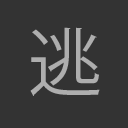
<style>
.page{position:relative;width:128px;height:128px;background:#333333}
.page>*{position:absolute;margin:0}
.t1{font:74px "KozGoPr6N-Regular";color:#aeaeae}
</style>
<div class="page">
<p class="t1" style="left:30px;top:27px;width:70px;height:69px">逃</p>
</div>
